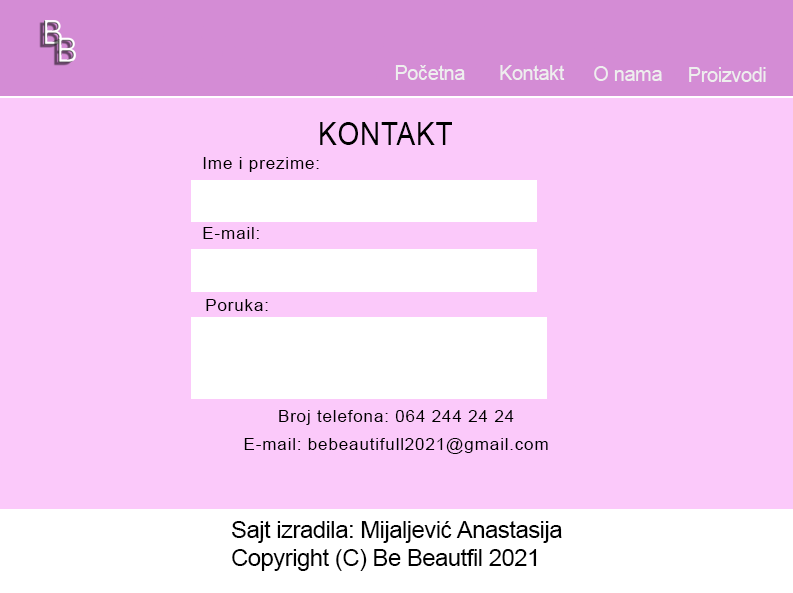
<style>
.page{position:relative;width:793px;height:593px;background:#fbc9fa}
.page>*{position:absolute;margin:0}
.t1{font:20px "ArialMT";letter-spacing:-0.02em;color:#eeeeee}
.t2{font:20.3px "ArialMT";letter-spacing:-0.02em;color:#eeeeee}
.t3{font:32px "ArialMT";letter-spacing:0.04em;color:#000000;scale:0.86 1}
.t4{font:17.3px "ArialMT";letter-spacing:0.04em;color:#000000}
.t5{font:22.7px/28.1px "ArialMT";letter-spacing:-0.02em;color:#000000;scale:1.05 1}
</style>
<div class="page">
<p class="t1" style="left:395px;top:65px;width:70px;height:15px">Početna</p>
<p class="t2" style="left:500px;top:65px;width:65px;height:15px">Kontakt</p>
<p class="t1" style="left:594px;top:66px;width:68px;height:15px">O nama</p>
<p class="t1" style="left:689px;top:67px;width:77px;height:15px">Proizvodi</p>
<p class="t3" style="left:320px;top:122px;width:132px;height:23px">KONTAKT</p>
<p class="t4" style="left:203px;top:157px;width:116px;height:15px">Ime i prezime:</p>
<p class="t4" style="left:203px;top:227px;width:56px;height:12px">E-mail:</p>
<p class="t4" style="left:206px;top:299px;width:62px;height:12px">Poruka:</p>
<p class="t4" style="left:279px;top:410px;width:235px;height:15px">Broj telefona: 064 244 24 24</p>
<p class="t4" style="left:244px;top:438px;width:304px;height:16px">E-mail: bebeautifull2021@gmail.com</p>
<p class="t5" style="left:232px;top:521px;width:330px;height:50px">Sajt izradila: Mijaljević Anastasija<br>Copyright (C) Be Beautfil 2021</p>
</div>
